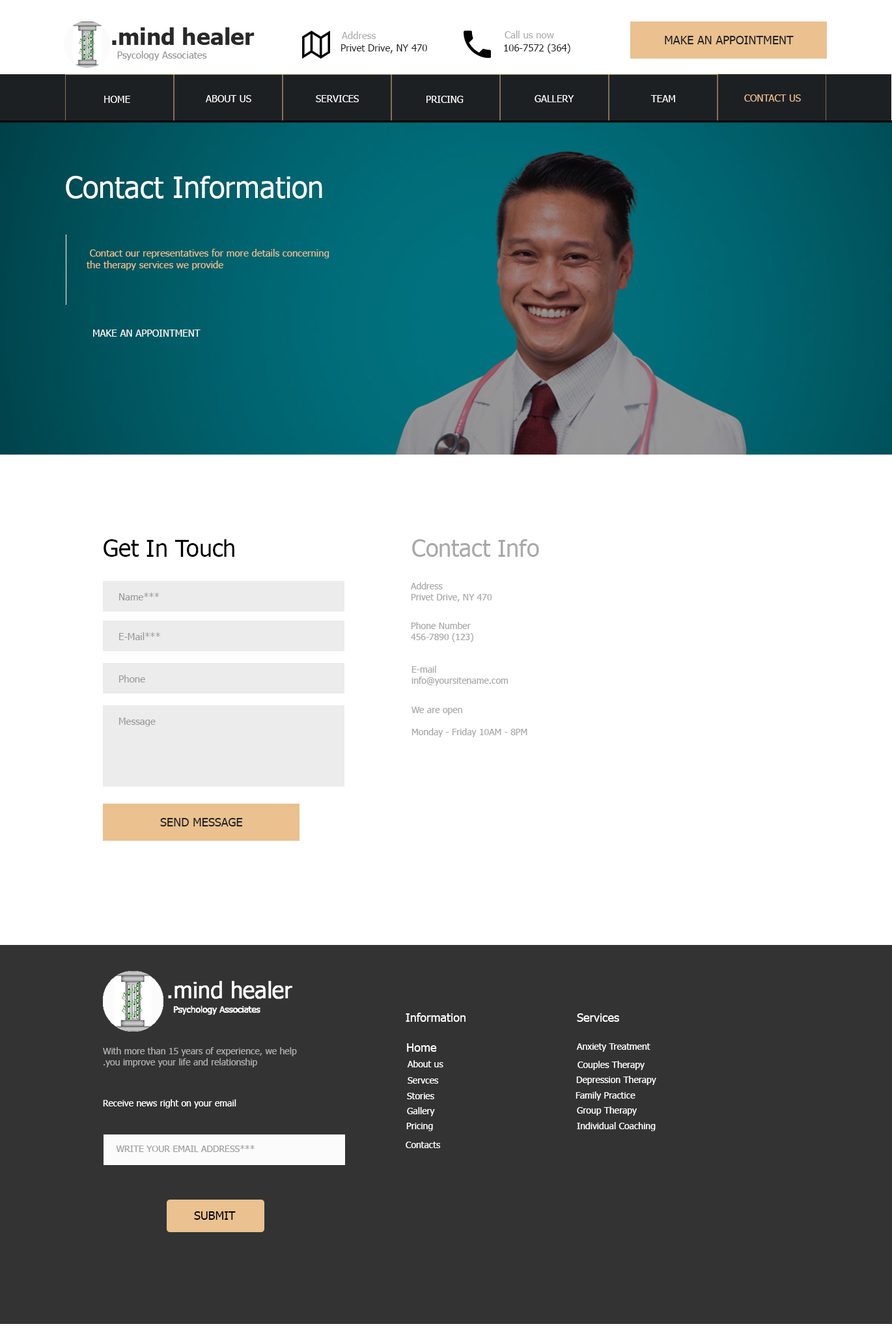
<style>
.page{position:relative;width:892px;height:1337px;background:#ffffff}
.page>*{position:absolute;margin:0}
.t1{font:9.8px "Tahoma";color:#aaaaaa}
.t2{font:11.7px "Tahoma";color:#1d2023}
.t3{font:9.8px "Tahoma";color:#1d2023}
.t4{font:9.8px "Tahoma";color:#ffffff}
.t5{font:9.8px "Tahoma";color:#eac18f}
.t6{font:29.3px "Tahoma";color:#ffffff}
.t7{font:23.4px "Tahoma";color:#000000}
.t8{font:23.4px "Tahoma";color:#a8a8a9}
.t9{font:9.8px "Tahoma";color:#969696}
.t10{font:9.1px "Tahoma";color:#a8a8a9}
.t11{font:11.7px "Tahoma";color:#ffffff}
.t12{font:9.1px "Tahoma";color:#adadad}
.t13{font:9.1px "Tahoma";color:#ffffff}
.t14{font:9.1px "Tahoma";color:#fefefe}
.t15{font:9.1px "Tahoma";color:#a0a0a0}
.t16{font:11.7px "Tahoma";color:#000000}
</style>
<div class="page">
<p class="t1" style="left:342px;top:31px;width:34px;height:8px">Address</p>
<p class="t1" style="left:505px;top:31px;width:49px;height:7px">Call us now</p>
<p class="t2" style="left:665px;top:36px;width:129px;height:8px">MAKE AN APPOINTMENT</p>
<p class="t3" style="left:341px;top:44px;width:86px;height:9px">470 Privet Drive, NY</p>
<p class="t3" style="left:504px;top:44px;width:66px;height:9px">(364) 106-7572</p>
<p class="t4" style="left:104px;top:96px;width:26px;height:7px">HOME</p>
<p class="t4" style="left:206px;top:95px;width:45px;height:7px">ABOUT US</p>
<p class="t4" style="left:316px;top:95px;width:43px;height:7px">SERVICES</p>
<p class="t4" style="left:426px;top:96px;width:38px;height:7px">PRICING</p>
<p class="t4" style="left:535px;top:95px;width:39px;height:7px">GALLERY</p>
<p class="t4" style="left:650px;top:95px;width:25px;height:7px">TEAM</p>
<p class="t5" style="left:744px;top:94px;width:57px;height:8px">CONTACT US</p>
<p class="t6" style="left:66px;top:176px;width:256px;height:23px">Contact Information</p>
<p class="t5" style="left:87px;top:249px;width:242px;height:21px;text-align:right">Contact our representatives for more details concerning <br>the therapy services we provide</p>
<p class="t4" style="left:93px;top:329px;width:108px;height:8px">MAKE AN APPOINTMENT</p>
<p class="t7" style="left:104px;top:539px;width:130px;height:18px">Get In Touch</p>
<p class="t8" style="left:412px;top:539px;width:127px;height:18px">Contact Info</p>
<p class="t9" style="left:119px;top:593px;width:40px;height:7px">***Name</p>
<p class="t10" style="left:410px;top:582px;width:82px;height:20px;text-align:right">Address<br>470 Privet Drive, NY</p>
<p class="t10" style="left:411px;top:622px;width:62px;height:20px;text-align:right">Phone Number<br>(123) 456-7890</p>
<p class="t9" style="left:119px;top:632px;width:41px;height:8px">***E-Mail</p>
<p class="t10" style="left:412px;top:665px;width:96px;height:21px;text-align:right">E-mail<br>info@yoursitename.com</p>
<p class="t9" style="left:119px;top:675px;width:26px;height:7px">Phone</p>
<p class="t10" style="left:412px;top:706px;width:115px;height:31px;text-align:right">We are open<br><br>Monday - Friday 10AM - 8PM</p>
<p class="t9" style="left:119px;top:718px;width:37px;height:9px">Message</p>
<p class="t2" style="left:160px;top:818px;width:83px;height:8px">SEND MESSAGE</p>
<p class="t11" style="left:406px;top:1012px;width:60px;height:10px">Information</p>
<p class="t11" style="left:577px;top:1013px;width:42px;height:9px">Services</p>
<p class="t12" style="left:103px;top:1047px;width:194px;height:20px;text-align:right">With more than 15 years of experience, we help<br> you improve your life and relationship.</p>
<p class="t11" style="left:407px;top:1043px;width:30px;height:9px">Home</p>
<p class="t13" style="left:576px;top:1043px;width:74px;height:9px">Anxiety Treatment</p>
<p class="t13" style="left:407px;top:1060px;width:36px;height:7px">About us</p>
<p class="t13" style="left:578px;top:1061px;width:67px;height:9px">Couples Therapy</p>
<p class="t13" style="left:408px;top:1077px;width:31px;height:6px">Servces</p>
<p class="t13" style="left:576px;top:1076px;width:80px;height:9px">Depression Therapy</p>
<p class="t13" style="left:407px;top:1093px;width:27px;height:6px">Stories</p>
<p class="t13" style="left:576px;top:1091px;width:59px;height:9px">Family Practice</p>
<p class="t14" style="left:103px;top:1099px;width:133px;height:9px">Receive news right on your email</p>
<p class="t13" style="left:407px;top:1107px;width:28px;height:9px">Gallery</p>
<p class="t13" style="left:577px;top:1106px;width:60px;height:9px">Group Therapy</p>
<p class="t13" style="left:577px;top:1122px;width:79px;height:9px">Individual Coaching</p>
<p class="t13" style="left:406px;top:1123px;width:27px;height:8px">Pricing</p>
<p class="t15" style="left:116px;top:1145px;width:139px;height:7px">***WRITE YOUR EMAIL ADDRESS</p>
<p class="t13" style="left:406px;top:1141px;width:35px;height:7px">Contacts</p>
<p class="t16" style="left:194px;top:1211px;width:42px;height:9px">SUBMIT</p>
</div>
